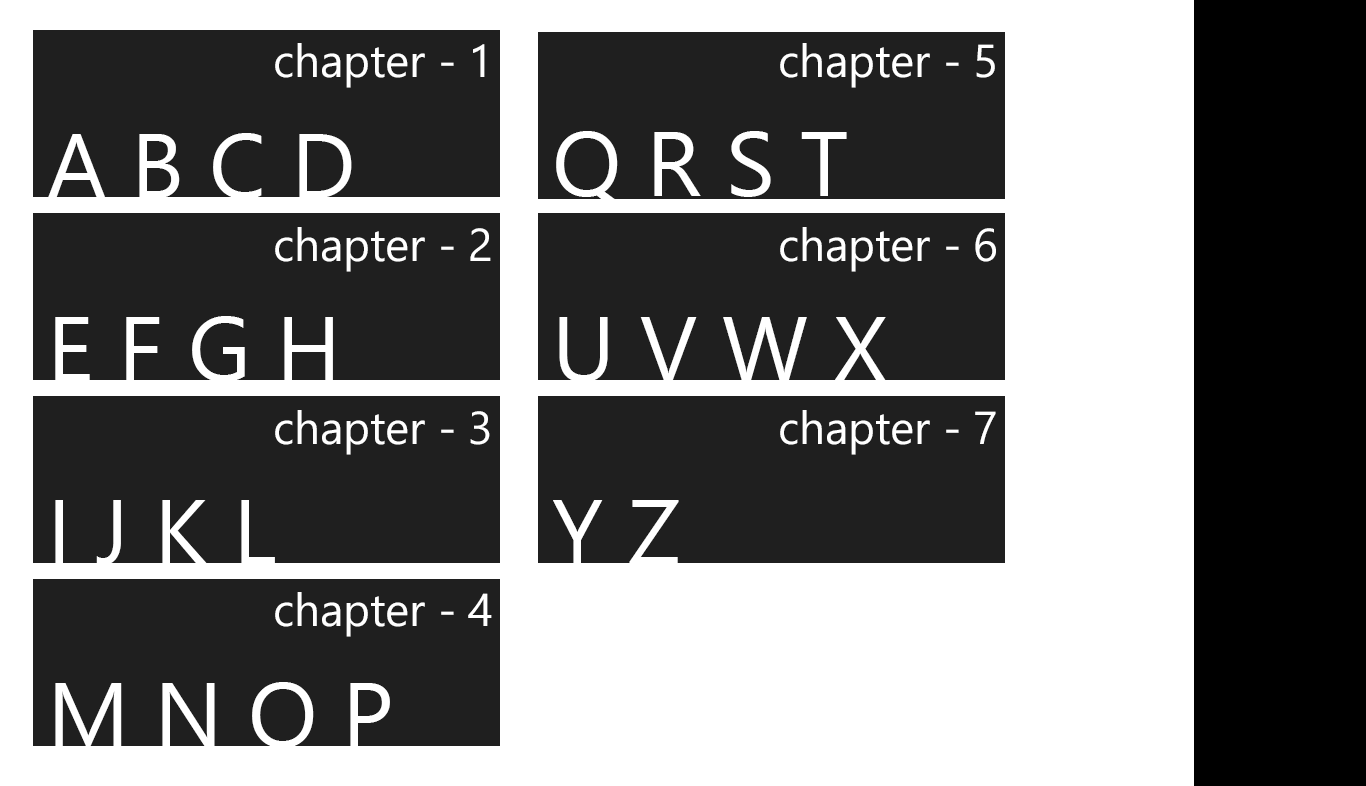
<style>
.page{position:relative;width:1366px;height:786px;background:#1f1f1f}
.page>*{position:absolute;margin:0}
.t1{font:45.9px "SegoeUI";color:#ffffff}
.t2{font:91.7px "SegoeUI";color:#ffffff}
</style>
<div class="page">
<p class="t1" style="left:275px;top:43px;width:210px;height:45px">chapter - 1</p>
<p class="t1" style="left:275px;top:43px;width:210px;height:45px">chapter - 1</p>
<p class="t1" style="left:780px;top:43px;width:215px;height:45px">chapter - 5</p>
<p class="t2" style="left:48px;top:133px;width:304px;height:66px">A B C D</p>
<p class="t2" style="left:48px;top:133px;width:304px;height:66px">A B C D</p>
<p class="t2" style="left:556px;top:131px;width:291px;height:74px">Q R S T</p>
<p class="t1" style="left:275px;top:227px;width:216px;height:45px">chapter - 2</p>
<p class="t1" style="left:275px;top:227px;width:216px;height:45px">chapter - 2</p>
<p class="t1" style="left:780px;top:227px;width:216px;height:45px">chapter - 6</p>
<p class="t2" style="left:55px;top:316px;width:278px;height:66px">E F G H</p>
<p class="t2" style="left:55px;top:316px;width:278px;height:66px">E F G H</p>
<p class="t2" style="left:559px;top:317px;width:327px;height:65px">U V W X</p>
<p class="t1" style="left:275px;top:410px;width:215px;height:45px">chapter - 3</p>
<p class="t1" style="left:275px;top:410px;width:215px;height:45px">chapter - 3</p>
<p class="t1" style="left:780px;top:410px;width:216px;height:45px">chapter - 7</p>
<p class="t2" style="left:55px;top:500px;width:220px;height:65px">I J K L</p>
<p class="t2" style="left:553px;top:500px;width:126px;height:64px">Y Z</p>
<p class="t1" style="left:275px;top:592px;width:217px;height:45px">chapter - 4</p>
<p class="t1" style="left:275px;top:592px;width:217px;height:45px">chapter - 4</p>
<p class="t2" style="left:55px;top:682px;width:335px;height:66px">M N O P</p>
<p class="t2" style="left:55px;top:682px;width:335px;height:66px">M N O P</p>
</div>
